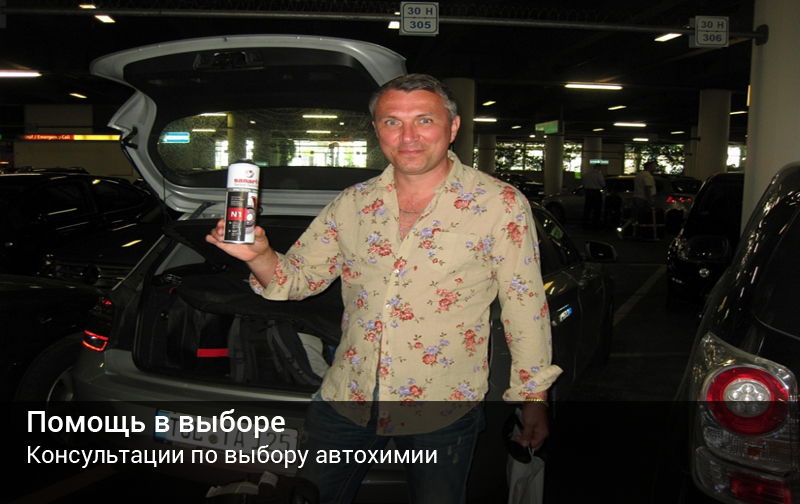
<style>
.page{position:relative;width:800px;height:504px}
.page>*{position:absolute;margin:0}
.t1{font:30px "Roboto-Medium";color:#ffffff}
.t2{font:24px "Roboto-Regular";color:#ffffff}
</style>
<div class="page">
<p class="t1" style="left:28px;top:409px;width:257px;height:29px">Помощь в выборе</p>
<p class="t2" style="left:28px;top:445px;width:409px;height:23px">Консультации по выбору автохимии</p>
</div>
